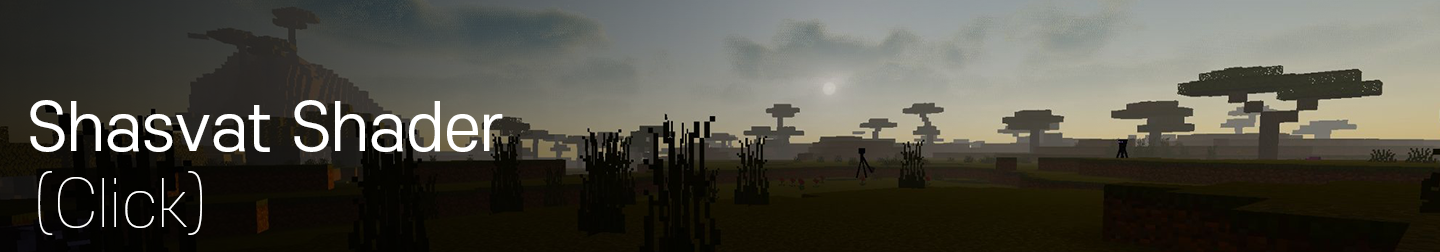
<style>
.page{position:relative;width:1440px;height:252px}
.page>*{position:absolute;margin:0}
.t1{font:64px "S-CoreDream-4Regular";color:#ffffff}
.t2{font:64px "S-CoreDream-1Thin";color:#ffffff}
</style>
<div class="page">
<p class="t1" style="left:30px;top:100px;width:473px;height:52px">Shasvat Shader</p>
<p class="t2" style="left:38px;top:171px;width:164px;height:64px">(Click)</p>
</div>
